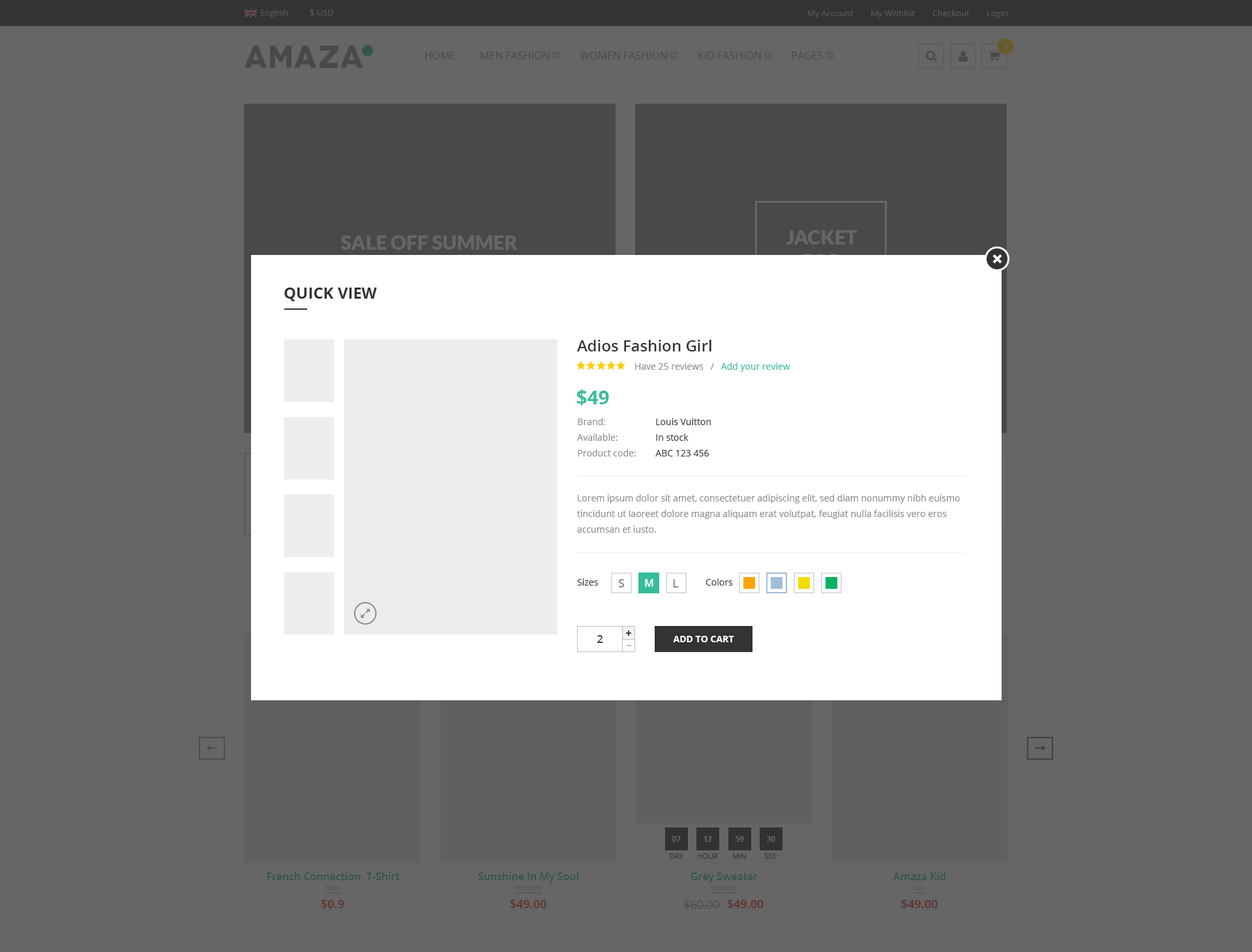
<style>
.page{position:relative;width:1252px;height:952px;background:#666666}
.page>*{position:absolute;margin:0}
.t1{font:8.5px "OpenSans";color:#565656}
.t2{font:8.5px "OpenSans";color:#bebebf}
.t3{font:7.2px "OpenSans";color:#595959}
.t4{font:31.3px "Novecentowide-Bold";letter-spacing:0.025em;color:#49494a;text-transform:uppercase}
.t5{font:10.4px "OpenSans";color:#49494a;text-transform:uppercase}
.t6{font:9.1px "OpenSans";letter-spacing:0.025em;color:#666666;text-transform:uppercase}
.t7{font:19.6px "Lato-Black";color:#666666;text-transform:uppercase}
.t8{font:15.7px "OpenSans-Bold";color:#333333;text-transform:uppercase}
.t9{font:15.7px "OpenSans-Semibold";color:#333333}
.t10{font:9.1px "OpenSans";color:#898c90}
.t11{font:9.1px "OpenSans";color:#37bc9b}
.t12{font:19.6px "OpenSans-Bold";color:#37bc9b}
.t13{font:9.1px/15.7px "OpenSans";color:#898c90}
.t14{font:9.1px/15.7px "OpenSans";color:#333333}
.t15{font:9.1px "OpenSans";color:#333333}
.t16{font:11.7px "OpenSans-Semibold";color:#898c90;text-transform:uppercase}
.t17{font:10.4px "OpenSans-Semibold";color:#ffffff;text-transform:uppercase}
.t18{font:10.4px "OpenSans-Semibold";color:#333333}
.t19{font:9.1px "OpenSans-Bold";color:#ffffff;text-transform:uppercase}
.t20{font:7.8px "OpenSans-Bold";color:#636363}
.t21{font:7.2px "OpenSans";color:#2b2b2b;text-transform:uppercase}
.t22{font:10.4px "OpenSans-Semibold";color:#34554d}
.t23{font:6.5px "OpenSans-Semibold";color:#585859;text-transform:uppercase}
.t24{font:11.7px "OpenSans-Bold";color:#603935}
.t25{font:11.7px "OpenSans-Light";color:#4a4a4b}
</style>
<div class="page">
<p class="t1" style="left:261px;top:9px;width:27px;height:9px">English</p>
<p class="t1" style="left:310px;top:9px;width:24px;height:7px">$ USD</p>
<p class="t2" style="left:808px;top:10px;width:200px;height:8px">My Account   <span class="t3">|</span>   My Wishlist   <span class="t3">|</span>   Checkout   <span class="t3">| </span>  Login</p>
<p class="t4" style="left:245px;top:46px;width:118px;height:22px">AMAZA</p>
<p class="t5" style="left:425px;top:52px;width:398px;height:7px">Home         Men Fashion           Women Fashion           Kid Fashion           Pages</p>
<p class="t6" style="left:1003px;top:43px;width:5px;height:7px">3</p>
<p class="t7" style="left:340px;top:235px;width:178px;height:15px">sale off summer</p>
<p class="t8" style="left:284px;top:288px;width:93px;height:13px">Quick View</p>
<p class="t9" style="left:577px;top:340px;width:135px;height:12px">Adios Fashion Girl</p>
<p class="t10" style="left:635px;top:363px;width:155px;height:9px">Have 25 reviews   /   <span class="t11">Add your review</span></p>
<p class="t12" style="left:577px;top:389px;width:32px;height:17px">$49</p>
<p class="t13" style="left:577px;top:418px;width:59px;height:39px">Brand:<br>Available:<br>Product code:</p>
<p class="t14" style="left:655px;top:418px;width:56px;height:39px">Louis Vuitton<br>In stock<br>ABC 123 456</p>
<p class="t13" style="left:577px;top:494px;width:383px;height:39px">Lorem ipsum dolor sit amet, consectetuer adipiscing elit, sed diam nonummy nibh euismo tincidunt ut laoreet dolore magna aliquam erat volutpat, feugiat nulla facilisis vero eros accumsan et iusto.</p>
<p class="t15" style="left:577px;top:579px;width:21px;height:7px">Sizes</p>
<p class="t16" style="left:618px;top:579px;width:7px;height:9px">S</p>
<p class="t17" style="left:645px;top:579px;width:9px;height:8px">M</p>
<p class="t16" style="left:673px;top:579px;width:6px;height:9px">L</p>
<p class="t15" style="left:706px;top:579px;width:27px;height:7px">Colors</p>
<p class="t18" style="left:597px;top:635px;width:6px;height:8px">2</p>
<p class="t19" style="left:673px;top:636px;width:61px;height:6px">Add To CarT</p>
<p class="t20" style="left:672px;top:836px;width:9px;height:6px">07</p>
<p class="t20" style="left:704px;top:836px;width:8px;height:6px">12</p>
<p class="t20" style="left:735px;top:836px;width:9px;height:6px">59</p>
<p class="t20" style="left:766px;top:836px;width:9px;height:6px">30</p>
<p class="t21" style="left:670px;top:854px;width:14px;height:5px">Day</p>
<p class="t21" style="left:698px;top:854px;width:20px;height:5px">hour</p>
<p class="t21" style="left:733px;top:854px;width:13px;height:5px">min</p>
<p class="t21" style="left:764px;top:854px;width:13px;height:5px">sec</p>
<p class="t22" style="left:267px;top:872px;width:133px;height:8px">French Connection  T-Shirt</p>
<p class="t22" style="left:478px;top:872px;width:101px;height:11px">Sunshine In My Soul</p>
<p class="t22" style="left:691px;top:873px;width:67px;height:10px">Grey Sweater</p>
<p class="t22" style="left:894px;top:872px;width:52px;height:8px">Amaza Kid</p>
<p class="t23" style="left:325px;top:886px;width:15px;height:4px">Men</p>
<p class="t23" style="left:515px;top:886px;width:26px;height:4px">Women</p>
<p class="t23" style="left:711px;top:886px;width:26px;height:4px">Women</p>
<p class="t23" style="left:914px;top:886px;width:11px;height:4px">Kid</p>
<p class="t24" style="left:321px;top:899px;width:23px;height:10px">$0.9</p>
<p class="t24" style="left:510px;top:899px;width:37px;height:10px">$49.00</p>
<p class="t25" style="left:684px;top:900px;width:36px;height:10px">$60.00</p>
<p class="t24" style="left:727px;top:899px;width:37px;height:10px">$49.00</p>
<p class="t24" style="left:901px;top:899px;width:37px;height:10px">$49.00</p>
</div>
